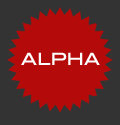
<style>
.page{position:relative;width:120px;height:125px;background:#333333}
.page>*{position:absolute;margin:0}
.t1{font:16.7px "BlairMdITCTTMedium";color:#ffffff}
</style>
<div class="page">
<p class="t1" style="left:21px;top:52px;width:79px;height:13px">ALPHA</p>
</div>
